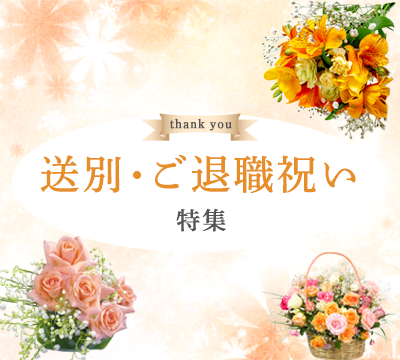
<style>
.page{position:relative;width:400px;height:360px;background:#ffffff}
.page>*{position:absolute;margin:0}
.t1{font:12.8px "DNPShueiMinPr6-M";letter-spacing:0.05em;color:#555555;font-weight:bold}
.t2{font:40px/40px "DNPShueiMinPr6-M";letter-spacing:0.05em;color:#e68e27;font-weight:bold}
.t3{font:40px/21.3px "DNPShueiMinPr6-M";letter-spacing:0.05em;color:#e68e27;font-weight:bold}
.t4{font:24px/40px "DNPShueiMinPr6-M";letter-spacing:0.05em;color:#555555;font-weight:bold}
</style>
<div class="page">
<p class="t1" style="left:170px;top:118px;width:62px;height:13px">thank you</p>
<p class="t2" style="left:40px;top:154px;width:316px;height:78px;text-align:center"><span class="t3">送別  </span>ご退職祝い<br><span class="t4">特集</span></p>
</div>
